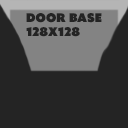
<style>
.page{position:relative;width:128px;height:128px;background:#242424}
.page>*{position:absolute;margin:0}
.t1{font:12px "AzoSansUber-Regular";color:#242424}
</style>
<div class="page">
<p class="t1" style="left:26px;top:13px;width:76px;height:24px">Door Base<br>128x128</p>
</div>
